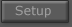
<style>
.page{position:relative;width:72px;height:27px;background:#5b5b5b}
.page>*{position:absolute;margin:0}
.t1{font:12.5px "Verdana";color:#9e9e9e}
</style>
<div class="page">
<p class="t1" style="left:15px;top:5px;width:36px;height:13px">Setup</p>
</div>
